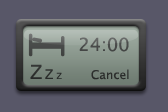
<style>
.page{position:relative;width:168px;height:112px;background:#585768}
.page>*{position:absolute;margin:0}
.t1{font:18px "LucidaSansUnicode";color:#4a4c4a}
.t2{font:19.3px "Verdana";color:#2e302e}
.t3{font:13.2px "Verdana";color:#282a29}
.t4{font:8.4px "Verdana";color:#2a2c2b}
.t5{font:12px "LucidaSansUnicode";color:#2b2d2c}
</style>
<div class="page">
<p class="t1" style="left:79px;top:37px;width:50px;height:15px">24:00</p>
<p class="t2" style="left:30px;top:64px;width:12px;height:15px">Z</p>
<p class="t3" style="left:45px;top:69px;width:8px;height:10px">Z</p>
<p class="t4" style="left:56px;top:72px;width:6px;height:7px">Z</p>
<p class="t5" style="left:91px;top:69px;width:38px;height:11px">Cancel</p>
</div>
